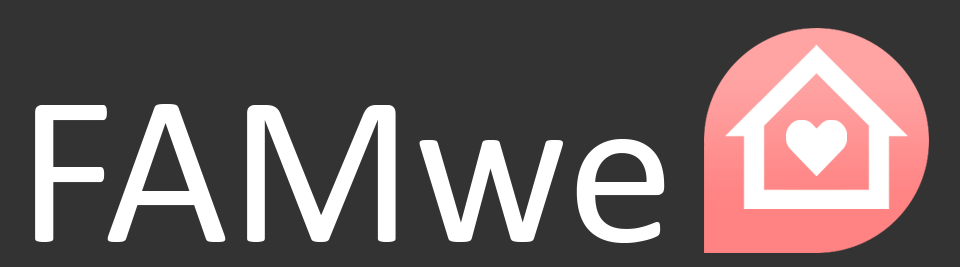
<style>
.page{position:relative;width:960px;height:267px;background:#333333}
.page>*{position:absolute;margin:0}
.t1{font:216.4px "Calibri";color:#ffffff}
</style>
<div class="page">
<p class="t1" style="left:35px;top:104px;width:630px;height:139px">FAMwe</p>
</div>
